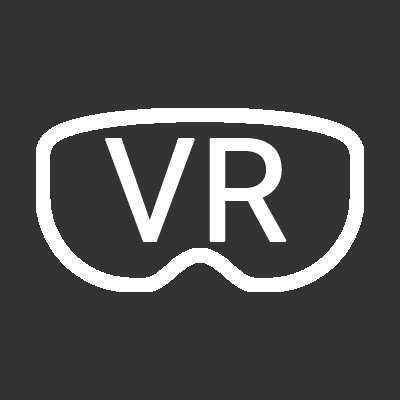
<style>
.page{position:relative;width:400px;height:400px;background:#333333}
.page>*{position:absolute;margin:0}
.t1{font:144.4px "Roboto-Regular";color:#ffffff;font-weight:bold}
</style>
<div class="page">
<p class="t1" style="left:105px;top:138px;width:182px;height:104px">VR</p>
</div>
